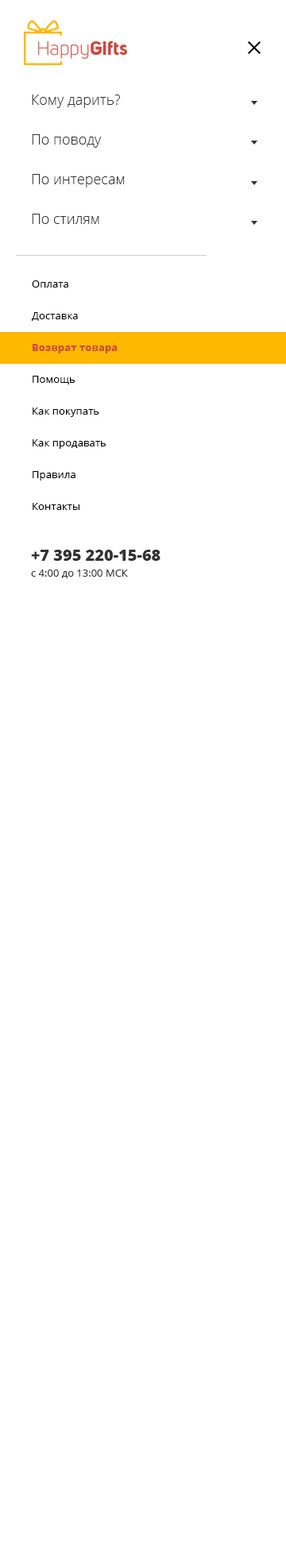
<style>
.page{position:relative;width:286px;height:1568px;background:#ffffff}
.page>*{position:absolute;margin:0}
.t1{font:14.3px "OpenSans-Light";color:#333333}
.t2{font:10.3px/31.8px "OpenSans";letter-spacing:0.01em;color:#010101}
.t3{font:10.3px/31.8px "OpenSans-Bold";letter-spacing:0.01em;color:#cf453c}
.t4{font:10.3px/15.9px "OpenSans";color:#333333}
.t5{font:15.9px/23.8px "OpenSans-Extrabold";color:#333333}
</style>
<div class="page">
<p class="t1" style="left:32px;top:95px;width:88px;height:13px">Кому дарить?</p>
<p class="t1" style="left:32px;top:134px;width:70px;height:14px">По поводу</p>
<p class="t1" style="left:32px;top:174px;width:93px;height:13px">По интересам</p>
<p class="t1" style="left:32px;top:214px;width:67px;height:10px">По стилям</p>
<p class="t2" style="left:32px;top:280px;width:86px;height:230px">Оплата<br>Доставка<br><span class="t3">Возврат товара<br></span>Помощь<br>Как покупать<br>Как продавать<br>Правила<br>Контакты</p>
<p class="t4" style="left:31px;top:550px;width:129px;height:28px"><span class="t5">+7 395 220-15-68<br></span>с 4:00 до 13:00 МСК</p>
</div>
